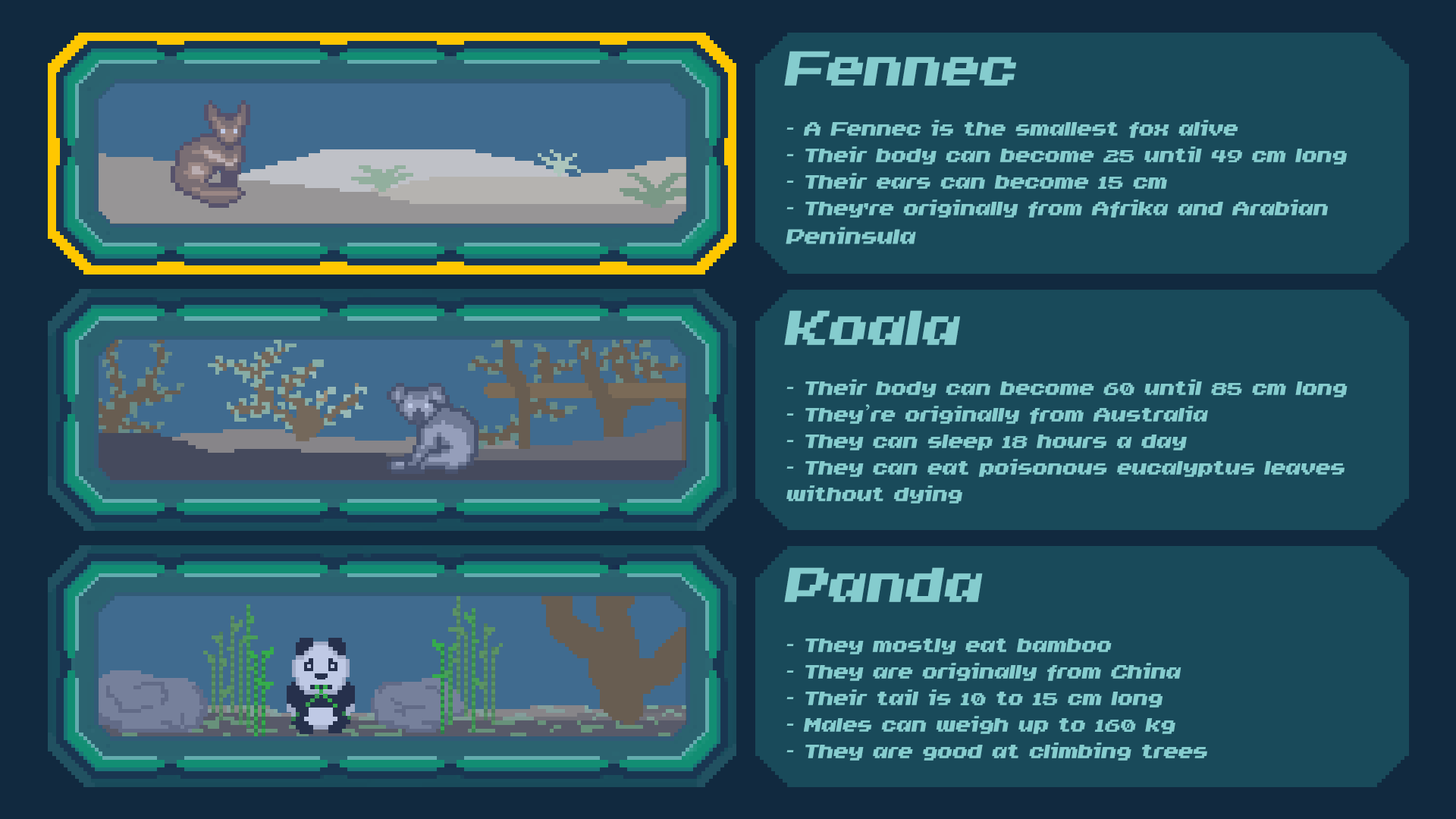
<style>
.page{position:relative;width:1456px;height:819px;background:#194a5a}
.page>*{position:absolute;margin:0}
.t1{font:22.1px "Invasion2000";color:#85ccce}
.t2{font:56.9px "Invasion2000";color:#85ccce}
.t3{font:23.7px "Invasion2000";color:#85ccce}
.t4{font:22.1px "TimesNewRomanPSMT";color:#85ccce}
</style>
<div class="page">
<p class="t1" style="left:784px;top:51px;width:563px;height:193px"><span class="t2">Fennec<br></span> <br>- A Fennec is the smallest fox alive <br>- Their body can become 25 until 49 cm long<br>- Their ears can become 15 cm<br>- They're originally from Afrika and Arabian <span class="t3">Peninsula</span></p>
<p class="t1" style="left:784px;top:310px;width:564px;height:194px"><span class="t2">Koala<br></span><br>- Their body can become 60 until 85 cm long<br>- They<span class="t4">’</span>re originally from Australia<br>- They can sleep 18 hours a day<br>- They can eat poisonous eucalyptus leaves without dying</p>
<p class="t1" style="left:784px;top:567px;width:423px;height:194px"><span class="t2">Panda<br></span><br>- They mostly eat bamboo<br>- They are originally from China<br>- Their tail is 10 to 15 cm long<br>- Males can weigh up to 160 kg<br>- They are good at climbing trees</p>
</div>
